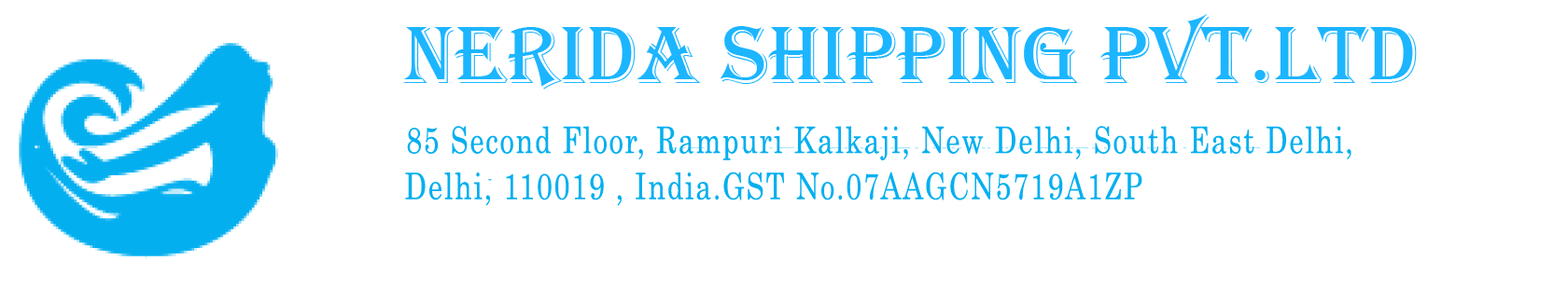
<style>
.page{position:relative;width:1568px;height:289px;background:#ffffff}
.page>*{position:absolute;margin:0}
.t1{font:36.6px "Century";letter-spacing:0.06em;color:#04afef;scale:0.77 1}
</style>
<div class="page">
<p class="t1" style="left:407px;top:126px;width:944px;height:35px">85 Second Floor, Rampuri Kalkaji, New Delhi, South East Delhi,</p>
<p class="t1" style="left:405px;top:172px;width:737px;height:34px">Delhi, 110019 , India.GST No.07AAGCN5719A1ZP</p>
</div>
